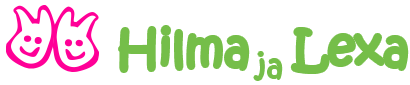
<style>
.page{position:relative;width:410px;height:85px;background:#ffffff}
.page>*{position:absolute;margin:0}
.t1{font:48px "KristenITC-Regular";color:#75be49}
.t2{font:30px "KristenITC-Regular";color:#75be49}
.t3{font:24px "KristenITC-Regular";color:#75be49}
</style>
<div class="page">
<p class="t1" style="left:120px;top:27px;width:287px;height:45px">Hilma     Lexa</p>
<p class="t2" style="left:254px;top:52px;width:28px;height:28px"><span class="t3"> </span>ja</p>
</div>
